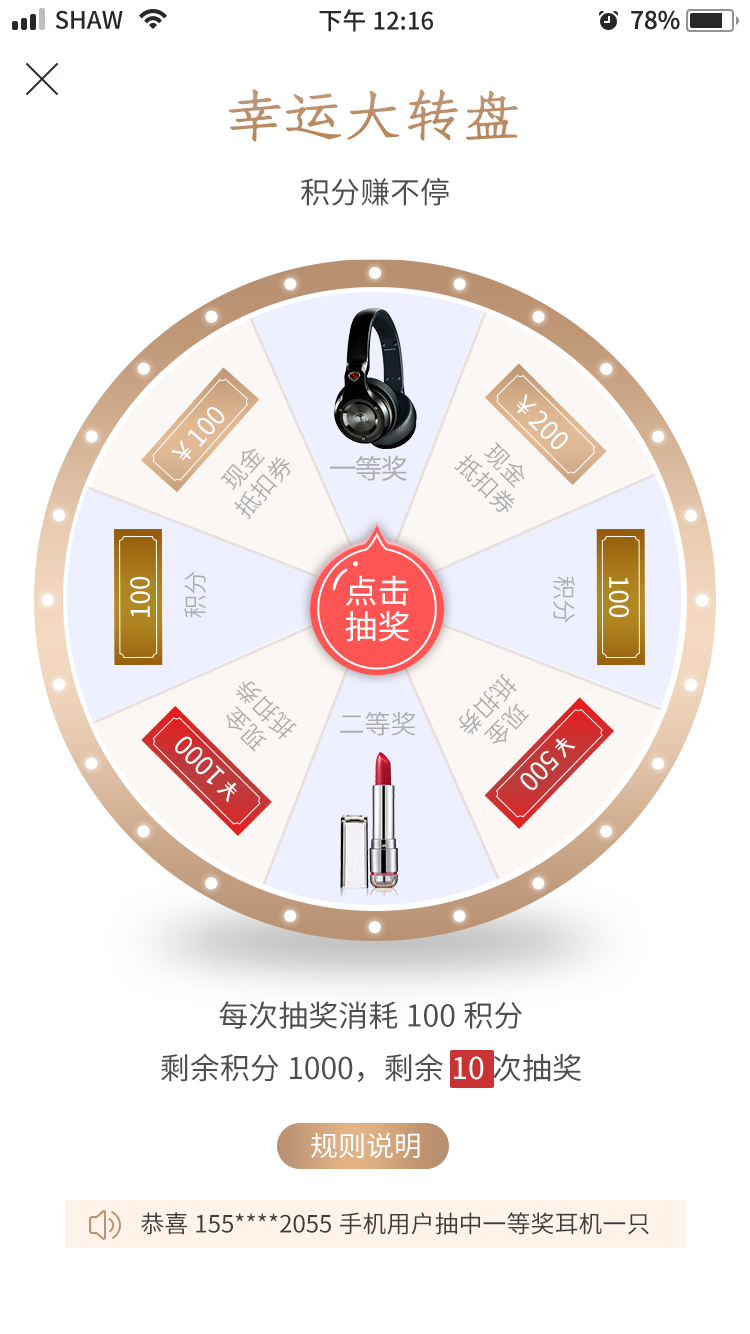
<style>
.page{position:relative;width:750px;height:1334px;background:#ffffff}
.page>*{position:absolute;margin:0}
.t1{font:24px "SourceHanSansCN-Medium";color:#282828}
.t2{font:59.3px "36--Regular";color:#ba8655}
.t3{font:30px "SourceHanSansCN-Regular";color:#4e4e4e}
.t4{font:26px "SourceHanSansCN-Regular";color:#ffffff}
.t5{font:24px/28.1px "SourceHanSansCN-Normal";color:#adadad}
.t6{font:24px/28px "SourceHanSansCN-Normal";color:#adadad}
.t7{font:26px "MicrosoftYaHei";color:#adadad}
.t8{font:25.9px "SourceHanSansCN-Regular";color:#ffffff}
.t9{font:23.9px "SourceHanSansCN-Normal";color:#adadad}
.t10{font:32.9px/35.4px "SourceHanSansCN-Regular";color:#ffffff}
.t11{font:24.1px/28.1px "SourceHanSansCN-Normal";color:#adadad}
.t12{font:26px "SourceHanSansCN-Normal";color:#adadad}
.t13{font:26.1px "SourceHanSansCN-Regular";color:#ffffff}
.t14{font:30px "SourceHanSansCN-Regular";color:#ffffff}
.t15{font:28px "SourceHanSansCN-Regular";color:#ffffff}
.t16{font:24px "SourceHanSansCN-Regular";color:#3d3d3d}
</style>
<div class="page">
<p class="t1" style="left:55px;top:10px;width:68px;height:19px">SHAW</p>
<p class="t1" style="left:319px;top:9px;width:114px;height:23px">下午12:16</p>
<p class="t1" style="left:631px;top:10px;width:49px;height:20px">78%</p>
<p class="t2" style="left:228px;top:89px;width:290px;height:53px">幸运大转盘</p>
<p class="t3" style="left:301px;top:178px;width:148px;height:28px">积分赚不停</p>
<p class="t4" style="left:516px;top:393px;width:52px;height:56px;rotate:45deg">￥200</p>
<p class="t4" style="left:171px;top:407px;width:54px;height:54px;rotate:-48deg">￥100</p>
<p class="t5" style="left:220px;top:448px;width:71px;height:72px;text-align:center;rotate:-48deg">现金<br>抵扣券</p>
<p class="t6" style="left:454px;top:442px;width:71px;height:71px;text-align:center;rotate:45deg">现金<br>抵扣券</p>
<p class="t7" style="left:330px;top:455px;width:77px;height:26px">一等奖</p>
<p class="t8" style="left:130px;top:576px;width:20px;height:41px;rotate:-90deg">100</p>
<p class="t9" style="left:184px;top:571px;width:22px;height:47px;rotate:-90deg">积分</p>
<p class="t10" style="left:345px;top:575px;width:65px;height:67px;text-align:center">点击<br>抽奖</p>
<p class="t9" style="left:553px;top:576px;width:22px;height:47px;rotate:90deg">积分</p>
<p class="t8" style="left:609px;top:577px;width:20px;height:41px;rotate:90deg">100</p>
<p class="t11" style="left:459px;top:673px;width:71px;height:71px;text-align:center;rotate:134deg">现金<br>抵扣券</p>
<p class="t5" style="left:226px;top:681px;width:71px;height:71px;text-align:center;rotate:-135deg">现金<br>抵扣券</p>
<p class="t12" style="left:340px;top:711px;width:76px;height:25px">二等奖</p>
<p class="t4" style="left:175px;top:736px;width:62px;height:67px;rotate:-135deg">￥1000</p>
<p class="t13" style="left:520px;top:737px;width:56px;height:53px;rotate:134deg">￥500</p>
<p class="t3" style="left:161px;top:1001px;width:420px;height:82px;text-align:center">每次抽奖消耗100积分<br>剩余积分1000，剩余<span class="t14">10</span>次抽奖</p>
<p class="t15" style="left:311px;top:1132px;width:109px;height:27px">规则说明</p>
<p class="t16" style="left:141px;top:1212px;width:508px;height:23px">恭喜155****2055手机用户抽中一等奖耳机一只</p>
</div>
